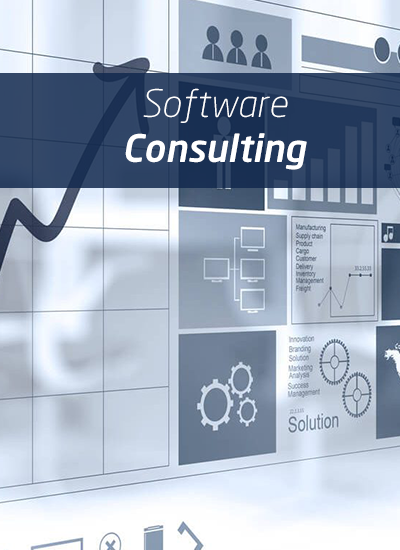
<style>
.page{position:relative;width:400px;height:550px}
.page>*{position:absolute;margin:0}
.t1{font:37.5px "NeoSans-MediumItalic";color:#ffffff}
.t2{font:37.5px "NeoSans-LightItalic";color:#ffffff}
</style>
<div class="page">
<p class="t1" style="left:125px;top:88px;width:182px;height:82px;text-align:center"><span class="t2">Software<br></span>Consulting</p>
</div>
